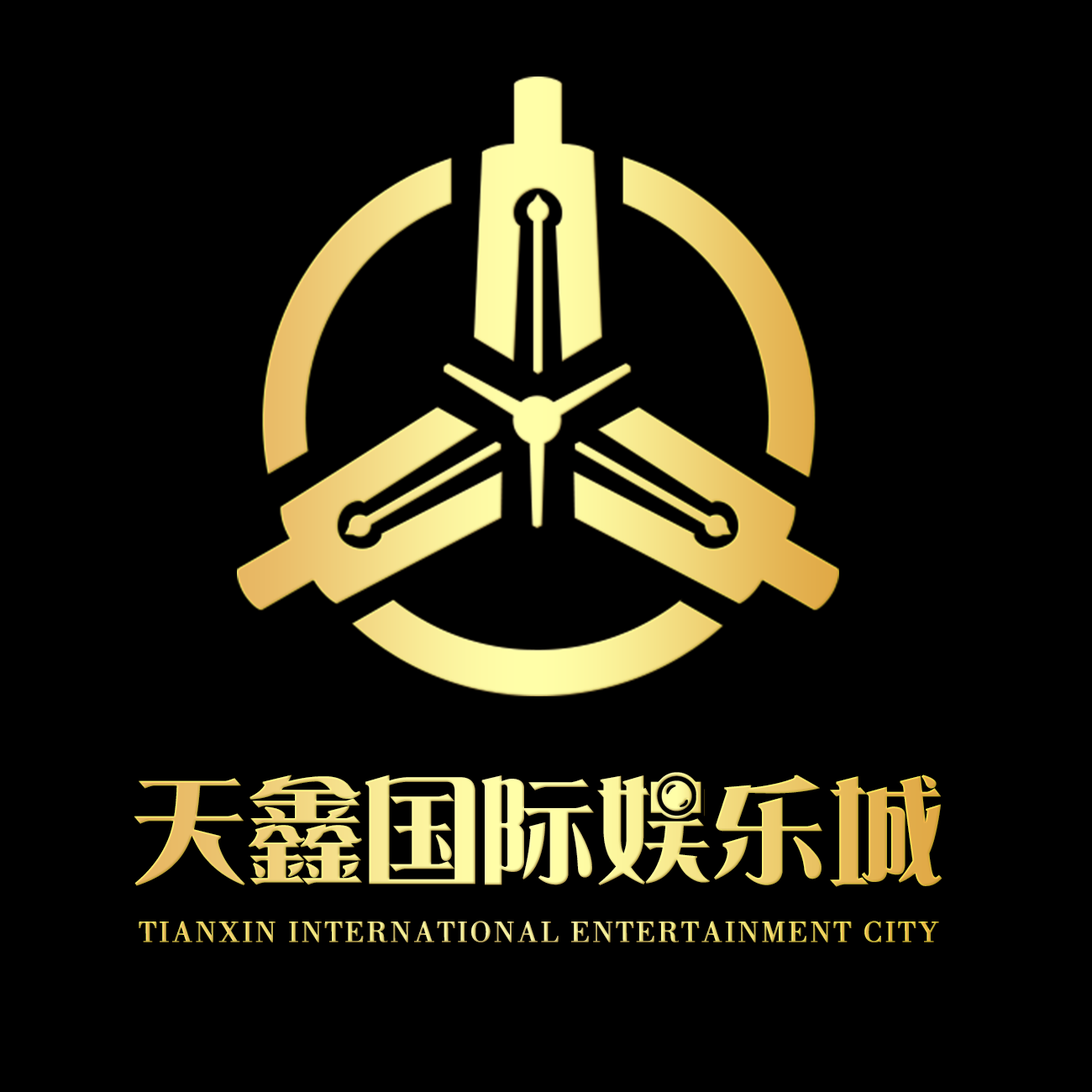
<style>
.page{position:relative;width:1092px;height:1092px;background:#000000}
.page>*{position:absolute;margin:0}
.t1{font:117.6px "DFPYaSongW9";letter-spacing:-0.04em;font-weight:bold}
.t2{font:30.2px "FZSS_GBK";letter-spacing:0.04em;text-transform:uppercase;font-weight:bold;scale:1.03 1}
</style>
<div class="page">
<p class="t1" style="left:134px;top:774px;width:808px;height:113px">天鑫国际娱乐城</p>
<p class="t2" style="left:139px;top:921px;width:800px;height:21px">Tianxin International Entertainment City</p>
</div>
